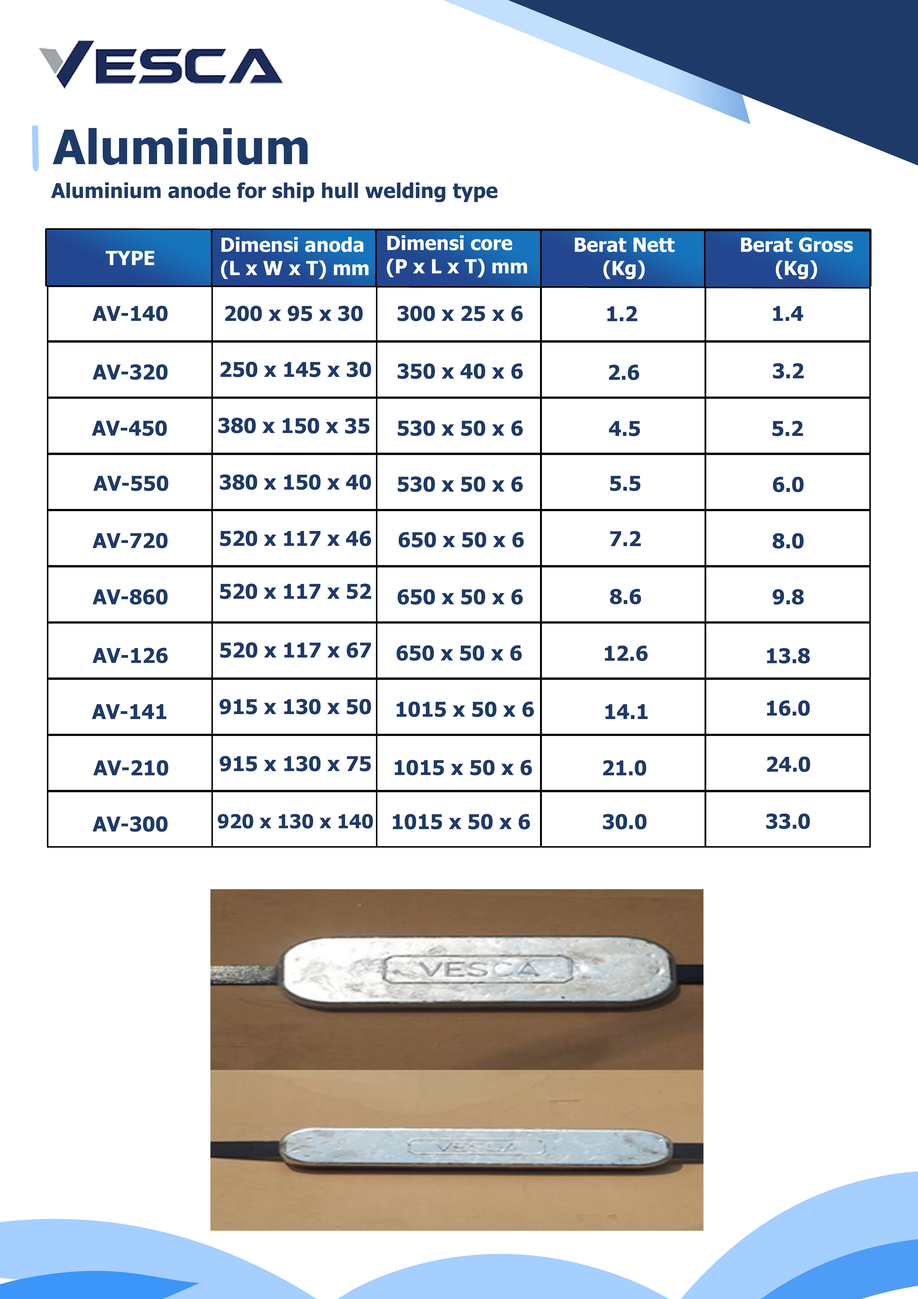
<style>
.page{position:relative;width:918px;height:1299px;background:#ffffff}
.page>*{position:absolute;margin:0}
.t1{font:47.6px "Tahoma-Bold";color:#1e3a68}
.t2{font:20.5px "Tahoma-Bold";color:#1e3a68}
.t3{font:19.4px "Tahoma-Bold";color:#ffffff}
.t4{font:19.3px "Tahoma-Bold";color:#1e3a68}
</style>
<div class="page">
<p class="t1" style="left:53px;top:128px;width:255px;height:37px">Aluminium</p>
<p class="t2" style="left:51px;top:182px;width:447px;height:20px">Aluminium anode for ship hull welding type</p>
<p class="t3" style="left:221px;top:237px;width:148px;height:42px">Dimensi anoda<br>(L x W x T) mm</p>
<p class="t3" style="left:387px;top:235px;width:140px;height:42px">Dimensi core<br>(P x L x T) mm</p>
<p class="t3" style="left:575px;top:238px;width:100px;height:41px;text-align:center">Berat Nett<br>(Kg)</p>
<p class="t3" style="left:741px;top:237px;width:112px;height:42px;text-align:center">Berat Gross<br>(Kg)</p>
<p class="t3" style="left:106px;top:251px;width:48px;height:14px">TYPE</p>
<p class="t2" style="left:93px;top:306px;width:75px;height:15px">AV-140</p>
<p class="t2" style="left:225px;top:306px;width:138px;height:15px">200 x 95 x 30</p>
<p class="t2" style="left:398px;top:306px;width:125px;height:15px">300 x 25 x 6</p>
<p class="t2" style="left:607px;top:306px;width:31px;height:15px">1.2</p>
<p class="t2" style="left:773px;top:306px;width:31px;height:15px">1.4</p>
<p class="t2" style="left:93px;top:364px;width:75px;height:16px">AV-320</p>
<p class="t2" style="left:221px;top:362px;width:150px;height:15px">250 x 145 x 30</p>
<p class="t2" style="left:398px;top:363px;width:125px;height:16px">350 x 40 x 6</p>
<p class="t2" style="left:609px;top:365px;width:30px;height:15px">2.6</p>
<p class="t2" style="left:773px;top:363px;width:31px;height:16px">3.2</p>
<p class="t2" style="left:92px;top:420px;width:75px;height:16px">AV-450</p>
<p class="t2" style="left:218px;top:417px;width:152px;height:17px">380 x 150 x 35</p>
<p class="t2" style="left:398px;top:420px;width:125px;height:16px">530 x 50 x 6</p>
<p class="t2" style="left:609px;top:421px;width:31px;height:15px">4.5</p>
<p class="t2" style="left:773px;top:421px;width:30px;height:15px">5.2</p>
<p class="t2" style="left:93px;top:475px;width:75px;height:16px">AV-550</p>
<p class="t2" style="left:220px;top:474px;width:151px;height:16px">380 x 150 x 40</p>
<p class="t2" style="left:398px;top:476px;width:125px;height:16px">530 x 50 x 6</p>
<p class="t2" style="left:610px;top:476px;width:31px;height:15px">5.5</p>
<p class="t2" style="left:773px;top:477px;width:31px;height:15px">6.0</p>
<p class="t2" style="left:93px;top:533px;width:75px;height:15px">AV-720</p>
<p class="t2" style="left:220px;top:531px;width:151px;height:15px">520 x 117 x 46</p>
<p class="t2" style="left:399px;top:532px;width:125px;height:15px">650 x 50 x 6</p>
<p class="t2" style="left:610px;top:531px;width:31px;height:15px">7.2</p>
<p class="t2" style="left:773px;top:533px;width:31px;height:15px">8.0</p>
<p class="t2" style="left:93px;top:589px;width:75px;height:15px">AV-860</p>
<p class="t2" style="left:220px;top:583px;width:151px;height:16px">520 x 117 x 52</p>
<p class="t2" style="left:398px;top:589px;width:125px;height:15px">650 x 50 x 6</p>
<p class="t2" style="left:610px;top:589px;width:31px;height:15px">8.6</p>
<p class="t2" style="left:773px;top:589px;width:31px;height:15px">9.8</p>
<p class="t2" style="left:93px;top:648px;width:75px;height:15px">AV-126</p>
<p class="t2" style="left:220px;top:642px;width:151px;height:16px">520 x 117 x 67</p>
<p class="t2" style="left:397px;top:645px;width:125px;height:16px">650 x 50 x 6</p>
<p class="t2" style="left:605px;top:645px;width:43px;height:16px">12.6</p>
<p class="t2" style="left:767px;top:648px;width:43px;height:15px">13.8</p>
<p class="t2" style="left:219px;top:699px;width:152px;height:15px">915 x 130 x 50</p>
<p class="t2" style="left:397px;top:701px;width:137px;height:16px">1015 x 50 x 6</p>
<p class="t2" style="left:767px;top:700px;width:43px;height:16px">16.0</p>
<p class="t2" style="left:92px;top:704px;width:74px;height:15px">AV-141</p>
<p class="t2" style="left:606px;top:704px;width:42px;height:15px">14.1</p>
<p class="t2" style="left:93px;top:760px;width:75px;height:15px">AV-210</p>
<p class="t2" style="left:220px;top:756px;width:151px;height:15px">915 x 130 x 75</p>
<p class="t2" style="left:395px;top:760px;width:137px;height:15px">1015 x 50 x 6</p>
<p class="t2" style="left:603px;top:760px;width:43px;height:15px">21.0</p>
<p class="t2" style="left:767px;top:756px;width:43px;height:16px">24.0</p>
<p class="t2" style="left:93px;top:816px;width:75px;height:16px">AV-300</p>
<p class="t4" style="left:218px;top:814px;width:155px;height:14px">920 x 130 x 140</p>
<p class="t2" style="left:393px;top:814px;width:137px;height:15px">1015 x 50 x 6</p>
<p class="t2" style="left:603px;top:814px;width:44px;height:15px">30.0</p>
<p class="t2" style="left:766px;top:813px;width:44px;height:16px">33.0</p>
</div>
